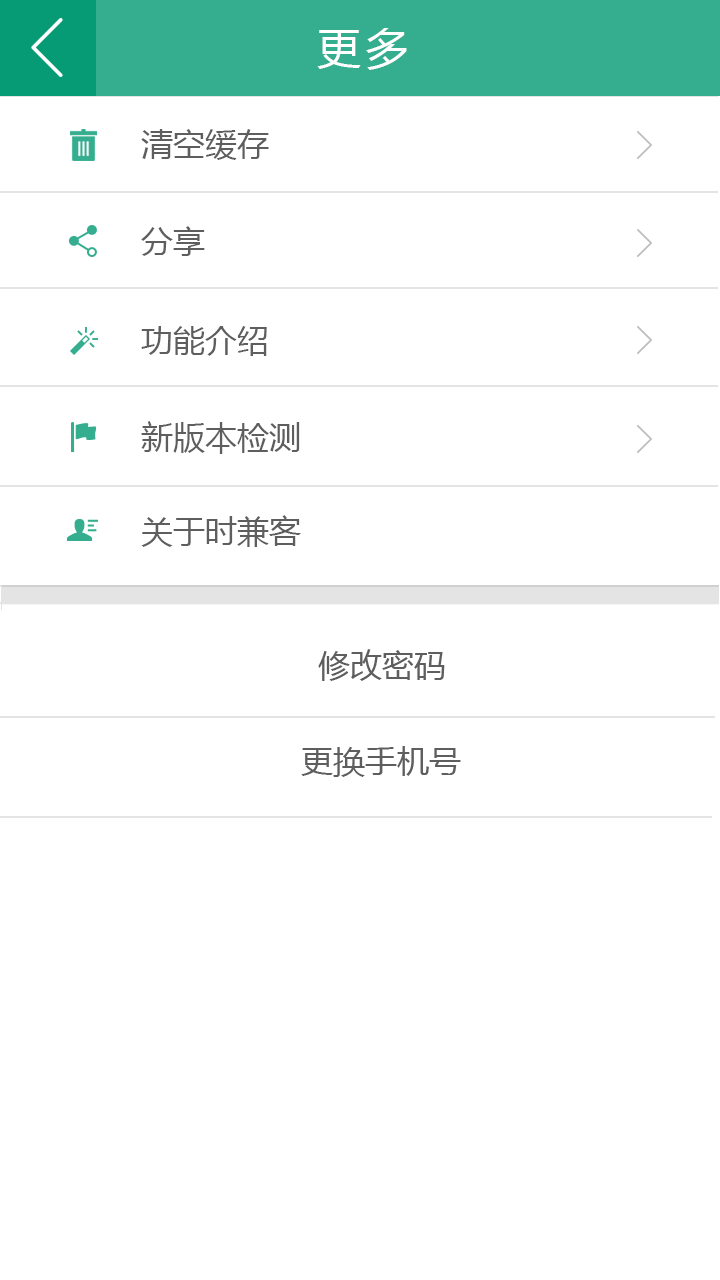
<style>
.page{position:relative;width:720px;height:1280px;background:#ffffff}
.page>*{position:absolute;margin:0}
.t1{font:44px "MicrosoftYaHei";letter-spacing:0.1em;color:#ffffff}
.t2{font:32px "MicrosoftYaHei";color:#5e5e5e}
</style>
<div class="page">
<p class="t1" style="left:317px;top:28px;width:90px;height:42px">更多</p>
<p class="t2" style="left:141px;top:129px;width:128px;height:31px">清空缓存</p>
<p class="t2" style="left:141px;top:226px;width:64px;height:30px">分享</p>
<p class="t2" style="left:141px;top:326px;width:126px;height:30px">功能介绍</p>
<p class="t2" style="left:141px;top:421px;width:159px;height:33px">新版本检测</p>
<p class="t2" style="left:141px;top:515px;width:160px;height:32px">关于时兼客</p>
</div>
